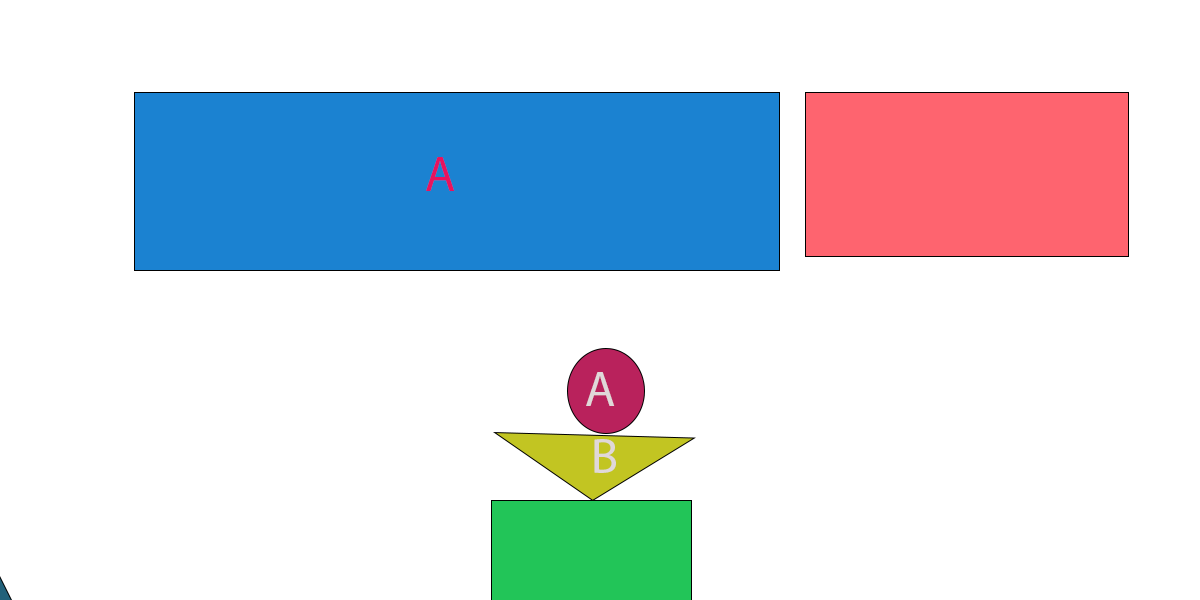
<style>
.page{position:relative;width:1200px;height:600px;background:#ffffff}
.page>*{position:absolute;margin:0}
.t1{font:50px "MyriadPro-Regular";color:#e8135e}
.t2{font:50px "MyriadPro-Regular";color:#e0d8d9}
</style>
<div class="page">
<p class="t1" style="left:426px;top:157px;width:29px;height:34px">A</p>
<p class="t2" style="left:586px;top:372px;width:29px;height:34px">A</p>
<p class="t2" style="left:594px;top:439px;width:22px;height:34px">B</p>
</div>
